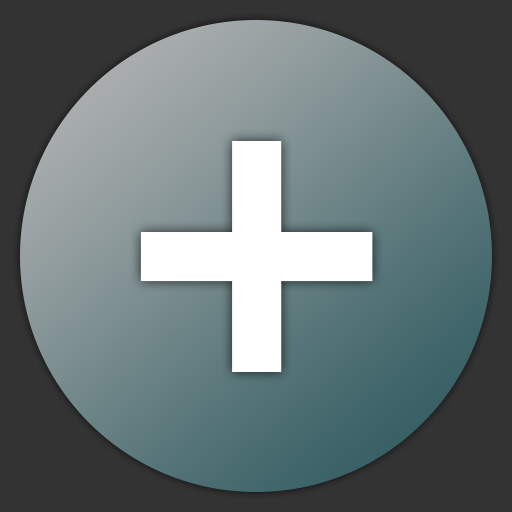
<style>
.page{position:relative;width:512px;height:512px;background:#333333}
.page>*{position:absolute;margin:0}
.t1{font:458px "HelveticaNeue-Bold";color:#ffffff}
</style>
<div class="page">
<p class="t1" style="left:140px;top:141px;width:233px;height:231px">+</p>
</div>
